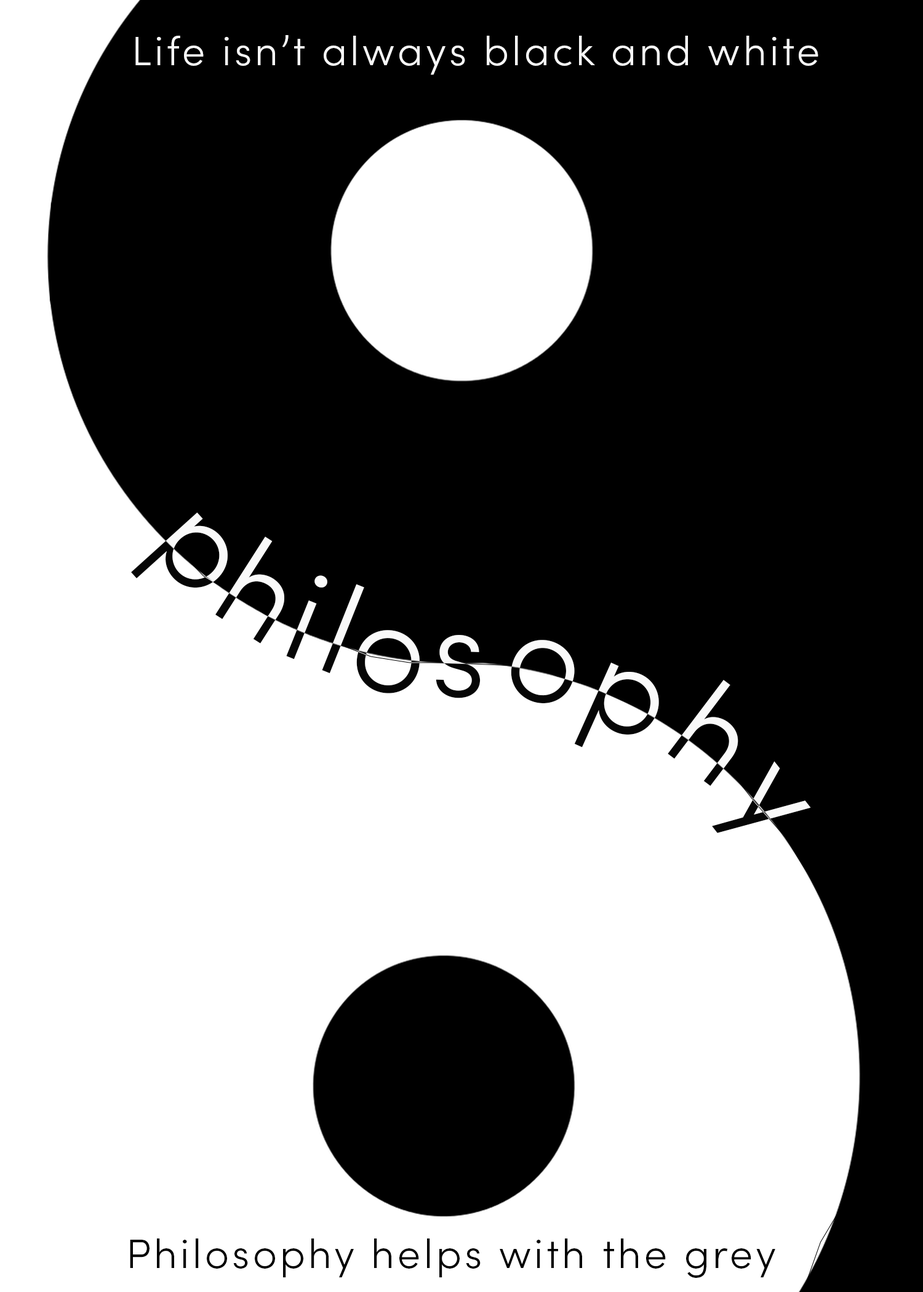
<style>
.page{position:relative;width:923px;height:1292px;background:#000000}
.page>*{position:absolute;margin:0}
.t1{font:41px "SofiaPro-Light";letter-spacing:0.075em;color:#f9f9f9}
.t2{font:41px "SofiaPro-Light";letter-spacing:0.075em;color:#000000}
</style>
<div class="page">
<p class="t1" style="left:135px;top:35px;width:683px;height:40px">Life isn’t always black and white</p>
<p class="t2" style="left:130px;top:1239px;width:645px;height:39px">Philosophy helps with the grey</p>
</div>
